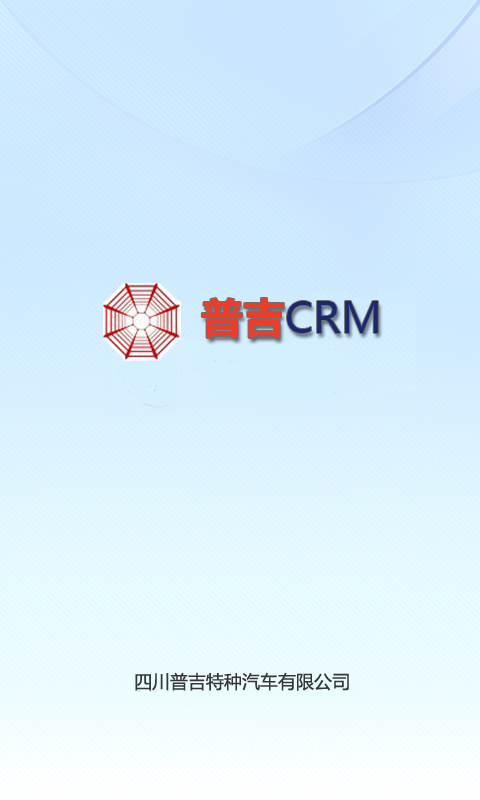
<style>
.page{position:relative;width:480px;height:800px}
.page>*{position:absolute;margin:0}
.t1{font:42px "MicrosoftYaHei";color:#1b286d}
.t2{font:42px "MicrosoftYaHei-Bold";color:#f03b28}
.t3{font:18px "MicrosoftYaHei";color:#363636}
</style>
<div class="page">
<p class="t1" style="left:201px;top:298px;width:177px;height:40px"><span class="t2">普吉</span>CRM</p>
<p class="t3" style="left:135px;top:672px;width:214px;height:19px">四川普吉特种汽车有限公司</p>
</div>
